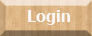
<style>
.page{position:relative;width:92px;height:36px}
.page>*{position:absolute;margin:0}
.t1{font:16px "Tahoma-Bold";color:#faf6f6}
</style>
<div class="page">
<p class="t1" style="left:28px;top:10px;width:42px;height:15px">Login</p>
</div>
